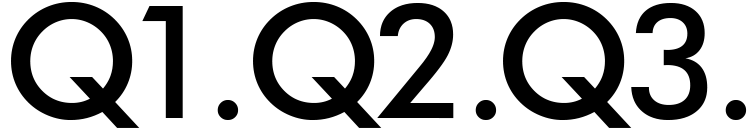
<style>
.page{position:relative;width:750px;height:130px;background:#ffffff}
.page>*{position:absolute;margin:0}
.t1{font:158.5px "FuturaBT-Medium";letter-spacing:-0.1em;color:#000000}
.t2{font:158.5px "FuturaBT-Medium";letter-spacing:-0.05em;color:#000000}
</style>
<div class="page">
<p class="t1" style="left:11px;top:2px;width:228px;height:126px">Q1.</p>
<p class="t2" style="left:253px;top:2px;width:244px;height:126px">Q2.</p>
<p class="t2" style="left:503px;top:2px;width:244px;height:126px">Q3.</p>
</div>
